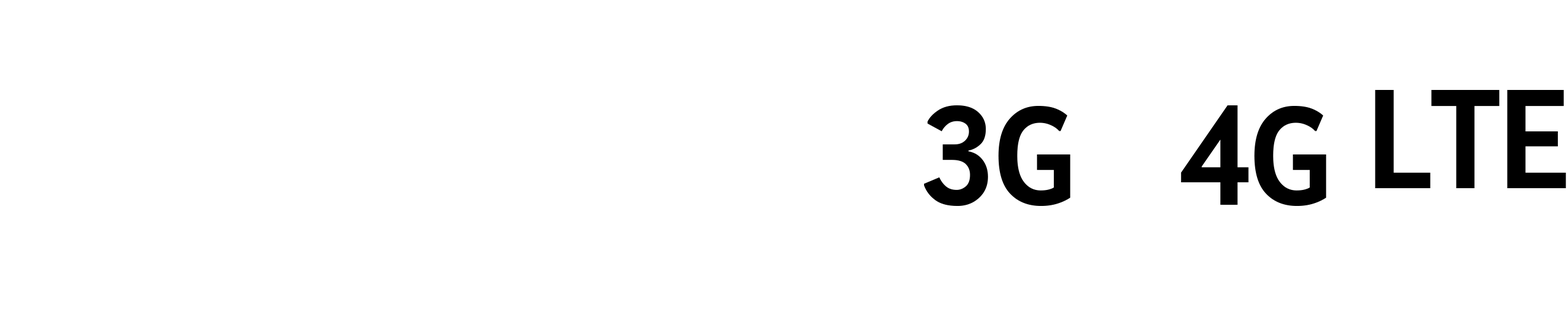
<style>
.page{position:relative;width:1568px;height:316px;background:#ffffff}
.page>*{position:absolute;margin:0}
.t1{font:136.7px "Prelude-CondensedBold";color:#000000}
</style>
<div class="page">
<p class="t1" style="left:1375px;top:90px;width:191px;height:98px">LTE</p>
<p class="t1" style="left:924px;top:105px;width:146px;height:101px">3G</p>
<p class="t1" style="left:1181px;top:105px;width:145px;height:101px">4G</p>
</div>
